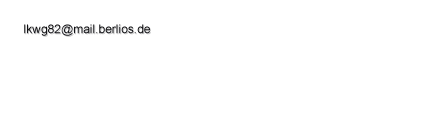
<style>
.page{position:relative;width:425px;height:120px;background:#ffffff}
.page>*{position:absolute;margin:0}
.t1{font:12px "ArialMT";color:#121216}
</style>
<div class="page">
<p class="t1" style="left:24px;top:24px;width:126px;height:12px">lkwg82@mail.berlios.de</p>
</div>
